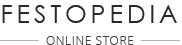
<style>
.page{position:relative;width:182px;height:45px;background:#ffffff}
.page>*{position:absolute;margin:0}
.t1{font:25px "CenturyGothic";letter-spacing:0.16em;color:#282828}
</style>
<div class="page">
<p class="t1" style="left:2px;top:5px;width:175px;height:18px">FESTOPEDIA</p>
</div>
